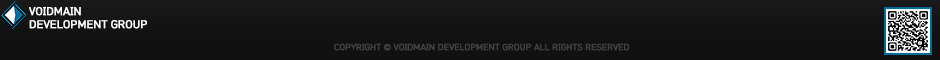
<style>
.page{position:relative;width:940px;height:60px;background:#111111}
.page>*{position:absolute;margin:0}
.t1{font:10.9px "HCRDotum-Bold";color:#ffffff}
.t2{font:8.6px "HCRDotum-Bold";color:#434343}
</style>
<div class="page">
<p class="t1" style="left:29px;top:6px;width:118px;height:23px">VOIDMAIN <br>DEVELOPMENT GROUP</p>
<p class="t2" style="left:334px;top:43px;width:296px;height:8px">COPYRIGHT © VOIDMAIN DEVELOPMENT GROUP ALL RIGHTS RESERVED</p>
</div>
